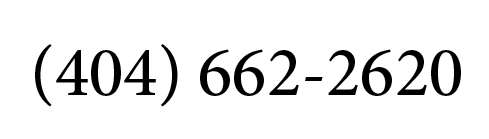
<style>
.page{position:relative;width:489px;height:139px;background:#ffffff}
.page>*{position:absolute;margin:0}
.t1{font:71px "MinionPro-Medium";color:#000000}
</style>
<div class="page">
<p class="t1" style="left:35px;top:44px;width:426px;height:63px">(404) 662-2620</p>
</div>
